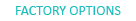
<style>
.page{position:relative;width:136px;height:21px;background:#ffffff}
.page>*{position:absolute;margin:0}
.t1{font:14px "Calibri";color:#1dbdc0}
</style>
<div class="page">
<p class="t1" style="left:16px;top:6px;width:105px;height:9px">FACTORY OPTIONS</p>
</div>
